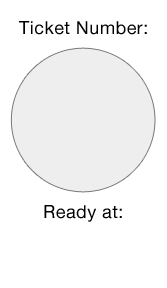
<style>
.page{position:relative;width:167px;height:288px;background:#ffffff}
.page>*{position:absolute;margin:0}
.t1{font:18px "HelveticaNeue";letter-spacing:0.025em;color:#000000}
</style>
<div class="page">
<p class="t1" style="left:19px;top:21px;width:128px;height:14px">Ticket Number:</p>
<p class="t1" style="left:44px;top:205px;width:78px;height:17px">Ready at:</p>
</div>
